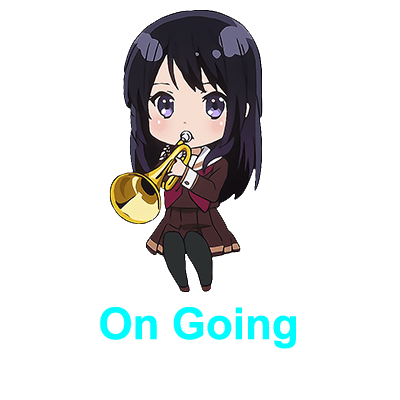
<style>
.page{position:relative;width:400px;height:400px;background:#ffffff}
.page>*{position:absolute;margin:0}
.t1{font:44px "Arial-BoldMT";color:#00fcff}
</style>
<div class="page">
<p class="t1" style="left:100px;top:307px;width:196px;height:42px">On Going</p>
</div>
